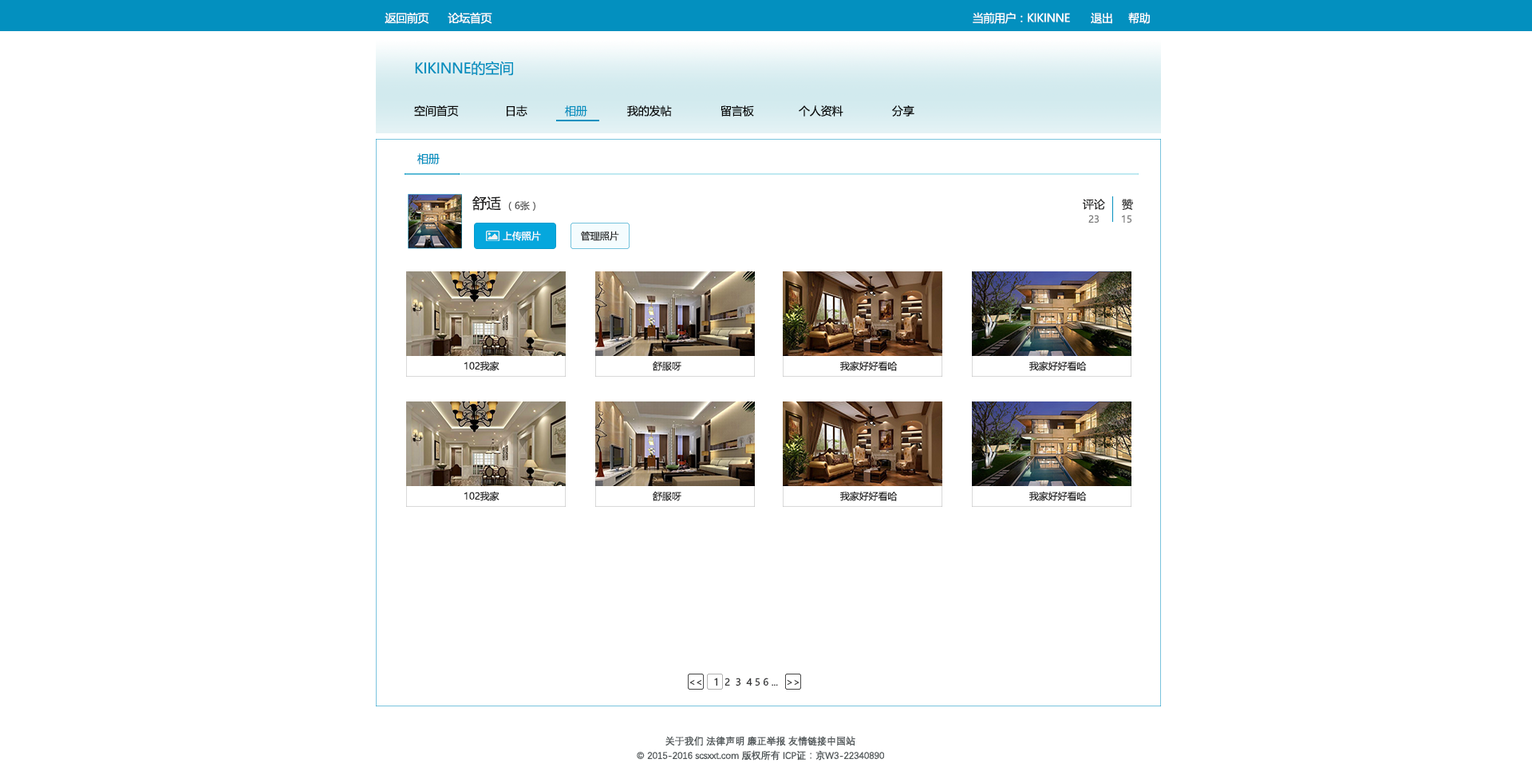
<style>
.page{position:relative;width:1532px;height:779px;background:#ffffff}
.page>*{position:absolute;margin:0}
.t1{font:11.2px "MicrosoftYaHei";letter-spacing:-0.025em;color:#ffffff}
.t2{font:14.4px "MicrosoftYaHei";letter-spacing:-0.01em;color:#0390bf}
.t3{font:11.2px "MicrosoftYaHei";letter-spacing:-0.01em;color:#0b0b0b}
.t4{font:11.2px "MicrosoftYaHei";letter-spacing:-0.01em;color:#040404}
.t5{font:11.2px "MicrosoftYaHei";letter-spacing:-0.01em;color:#0390bf}
.t6{font:14.4px "MicrosoftYaHei";letter-spacing:-0.01em;color:#242323}
.t7{font:9.6px "MicrosoftYaHei";letter-spacing:-0.01em;color:#585858}
.t8{font:11.2px "MicrosoftYaHei";letter-spacing:-0.01em;color:#242323}
.t9{font:9.6px "MicrosoftYaHei";letter-spacing:-0.01em;color:#7b7b7b}
.t10{font:9.6px "MicrosoftYaHei";letter-spacing:-0.01em;color:#ffffff}
.t11{font:9.6px "MicrosoftYaHei";letter-spacing:-0.01em;color:#242323}
.t12{font:9.6px "MicrosoftYaHei";letter-spacing:-0.01em;color:#38393a}
.t13{font:9.6px "MicrosoftYaHei";letter-spacing:-0.01em;color:#252626}
.t14{font:9.6px/14.4px "DengXian-Regular";letter-spacing:-0.025em;color:#545a5c;font-weight:bold}
</style>
<div class="page">
<p class="t1" style="left:384px;top:12px;width:45px;height:12px">返回前页</p>
<p class="t1" style="left:448px;top:12px;width:44px;height:12px">论坛首页</p>
<p class="t1" style="left:972px;top:12px;width:98px;height:12px">当前用户：KIKINNE</p>
<p class="t1" style="left:1090px;top:13px;width:22px;height:11px">退出</p>
<p class="t1" style="left:1128px;top:12px;width:21px;height:12px">帮助</p>
<p class="t2" style="left:415px;top:61px;width:98px;height:15px">KIKINNE的空间</p>
<p class="t3" style="left:414px;top:105px;width:45px;height:11px">空间首页</p>
<p class="t4" style="left:507px;top:105px;width:20px;height:11px">日志</p>
<p class="t5" style="left:565px;top:105px;width:22px;height:11px">相册</p>
<p class="t4" style="left:627px;top:105px;width:45px;height:11px">我的发帖</p>
<p class="t4" style="left:720px;top:105px;width:34px;height:11px">留言板</p>
<p class="t4" style="left:799px;top:105px;width:44px;height:11px">个人资料</p>
<p class="t4" style="left:892px;top:105px;width:22px;height:11px">分享</p>
<p class="t5" style="left:417px;top:153px;width:23px;height:11px">相册</p>
<p class="t6" style="left:472px;top:196px;width:29px;height:15px">舒适</p>
<p class="t7" style="left:508px;top:200px;width:27px;height:11px">（6张）</p>
<p class="t8" style="left:1082px;top:199px;width:23px;height:11px">评论</p>
<p class="t8" style="left:1122px;top:199px;width:11px;height:11px">赞</p>
<p class="t9" style="left:1088px;top:215px;width:11px;height:8px">23</p>
<p class="t9" style="left:1122px;top:215px;width:10px;height:8px">15</p>
<p class="t10" style="left:503px;top:231px;width:38px;height:10px">上传照片</p>
<p class="t11" style="left:581px;top:231px;width:38px;height:10px">管理照片</p>
<p class="t11" style="left:464px;top:361px;width:35px;height:10px">102我家</p>
<p class="t11" style="left:653px;top:361px;width:28px;height:10px">舒服呀</p>
<p class="t11" style="left:840px;top:361px;width:57px;height:10px">我家好好看哈</p>
<p class="t11" style="left:1029px;top:361px;width:57px;height:10px">我家好好看哈</p>
<p class="t11" style="left:464px;top:491px;width:35px;height:10px">102我家</p>
<p class="t11" style="left:653px;top:491px;width:28px;height:10px">舒服呀</p>
<p class="t11" style="left:840px;top:491px;width:57px;height:10px">我家好好看哈</p>
<p class="t11" style="left:1029px;top:491px;width:57px;height:10px">我家好好看哈</p>
<p class="t12" style="left:689px;top:677px;width:110px;height:9px">&lt;&lt;    1  2 <span class="t13"> 3</span>  4 5 6 ...   &gt;&gt;</p>
<p class="t14" style="left:637px;top:735px;width:247px;height:25px;text-align:center">关于我们 法律声明 廉正举报 友情链接中国站<br>© 2015-2016 scsxxt.com 版权所有 ICP证：京W3-22340890</p>
</div>
